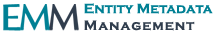
<style>
.page{position:relative;width:216px;height:34px;background:#ffffff}
.page>*{position:absolute;margin:0}
.t1{font:14px "CopperplateGothic-Bold";color:#008094}
.t2{font:14px "CopperplateGothic-Bold";letter-spacing:0.075em;color:#303d4d}
</style>
<div class="page">
<p class="t1" style="left:84px;top:3px;width:129px;height:28px">Entity Metadata<br><span class="t2">Management</span></p>
</div>
